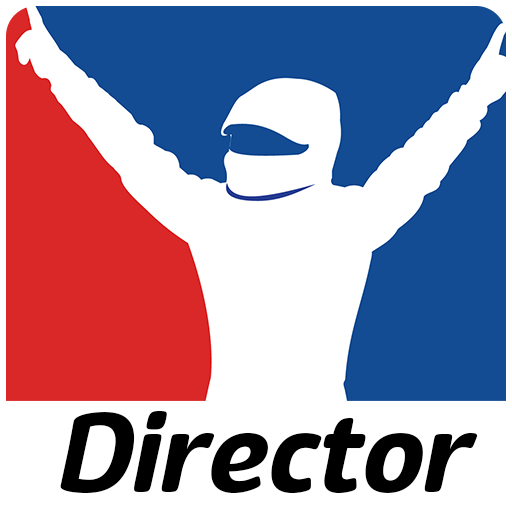
<style>
.page{position:relative;width:512px;height:512px;background:#ffffff}
.page>*{position:absolute;margin:0}
.t1{font:110px "Eigerdals-BlaIta";color:#000000}
</style>
<div class="page">
<p class="t1" style="left:60px;top:411px;width:418px;height:83px">Director</p>
</div>
